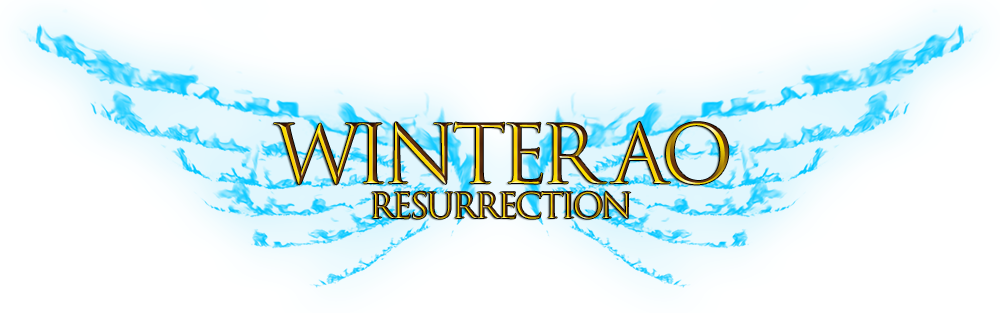
<style>
.page{position:relative;width:1000px;height:313px;background:#ffffff}
.page>*{position:absolute;margin:0}
.t1{font:78.9px "TrajanColor-Concept";letter-spacing:-0.08em}
.t2{font:33.9px "TrajanColor-Concept";letter-spacing:-0.08em}
</style>
<div class="page">
<p class="t1" style="left:274px;top:122px;width:455px;height:63px">Winter AO</p>
<p class="t2" style="left:372px;top:191px;width:259px;height:28px">Resurrection</p>
</div>
